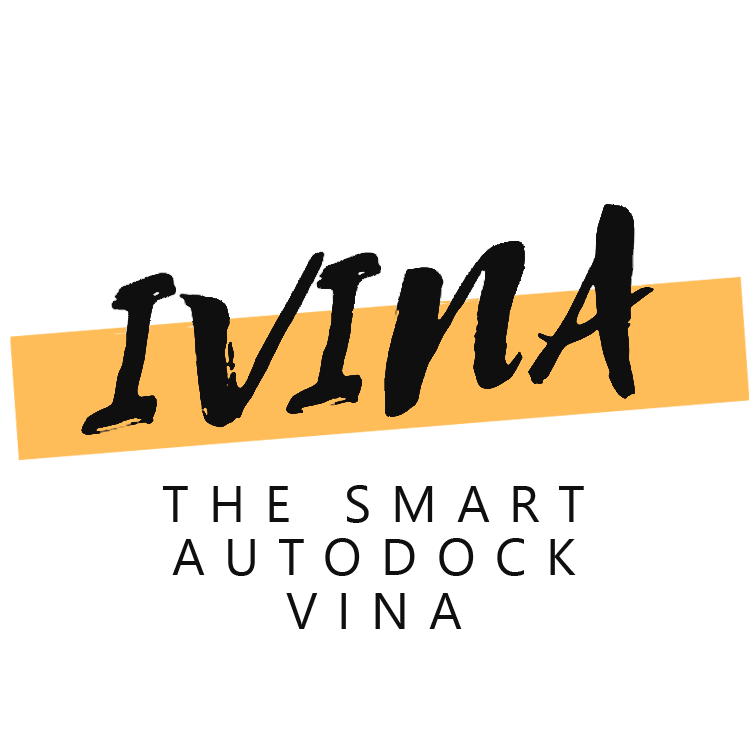
<style>
.page{position:relative;width:756px;height:756px;background:#ffffff}
.page>*{position:absolute;margin:0}
.t1{font:51.4px/53.8px "SegoeUIHistoric";letter-spacing:0.38em;color:#0f0f0f}
</style>
<div class="page">
<p class="t1" style="left:163px;top:485px;width:421px;height:144px;text-align:center">THE SMART<br>AUTODOCK<br>VINA</p>
</div>
